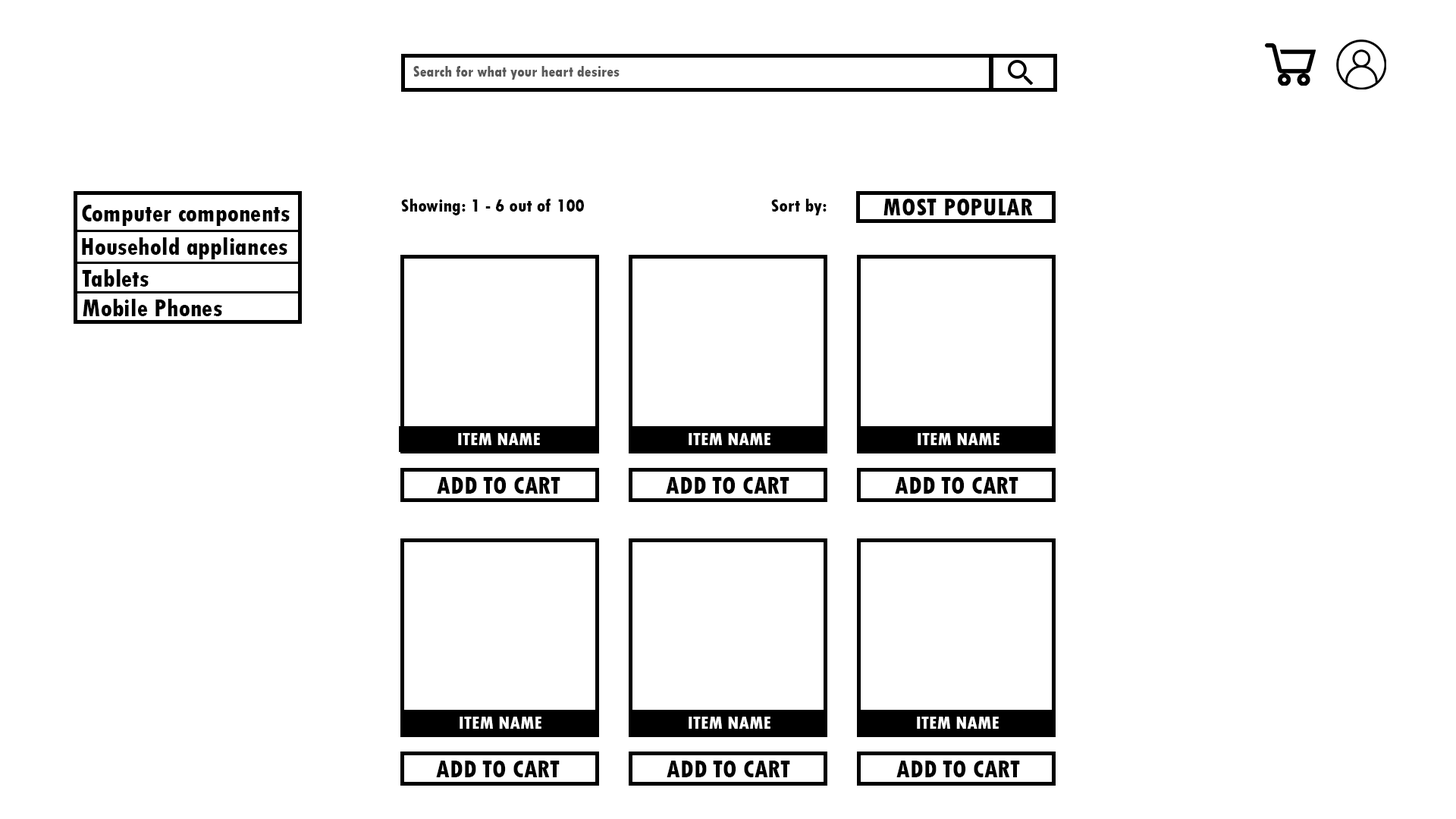
<style>
.page{position:relative;width:1456px;height:819px;background:#ffffff}
.page>*{position:absolute;margin:0}
.t1{font:15.8px "TwCenMT-CondensedExtraBold";color:#5a5a5a}
.t2{font:25.3px "TwCenMT-CondensedExtraBold";color:#000000}
.t3{font:19px "TwCenMT-CondensedExtraBold";color:#000000}
.t4{font:19px "TwCenMT-CondensedExtraBold";color:#ffffff}
</style>
<div class="page">
<p class="t1" style="left:413px;top:66px;width:207px;height:14px">Search for what your heart desires</p>
<p class="t2" style="left:82px;top:205px;width:208px;height:21px">Computer components</p>
<p class="t3" style="left:401px;top:199px;width:183px;height:16px">Showing: 1 - 6 out of 100</p>
<p class="t3" style="left:771px;top:199px;width:56px;height:16px">Sort by:</p>
<p class="t2" style="left:883px;top:199px;width:150px;height:16px">MOST POPULAR</p>
<p class="t2" style="left:82px;top:237px;width:205px;height:22px">Household appliances</p>
<p class="t2" style="left:82px;top:269px;width:67px;height:18px">Tablets</p>
<p class="t2" style="left:83px;top:299px;width:139px;height:17px">Mobile Phones</p>
<p class="t4" style="left:458px;top:433px;width:82px;height:12px">ITEM NAME</p>
<p class="t4" style="left:689px;top:433px;width:81px;height:12px">ITEM NAME</p>
<p class="t4" style="left:918px;top:433px;width:81px;height:12px">ITEM NAME</p>
<p class="t2" style="left:437px;top:477px;width:123px;height:17px">ADD TO CART</p>
<p class="t2" style="left:666px;top:477px;width:123px;height:17px">ADD TO CART</p>
<p class="t2" style="left:895px;top:477px;width:123px;height:17px">ADD TO CART</p>
<p class="t4" style="left:460px;top:717px;width:81px;height:12px">ITEM NAME</p>
<p class="t4" style="left:689px;top:717px;width:81px;height:12px">ITEM NAME</p>
<p class="t4" style="left:917px;top:717px;width:82px;height:12px">ITEM NAME</p>
<p class="t2" style="left:436px;top:761px;width:124px;height:16px">ADD TO CART</p>
<p class="t2" style="left:667px;top:761px;width:123px;height:16px">ADD TO CART</p>
<p class="t2" style="left:896px;top:761px;width:124px;height:16px">ADD TO CART</p>
</div>
